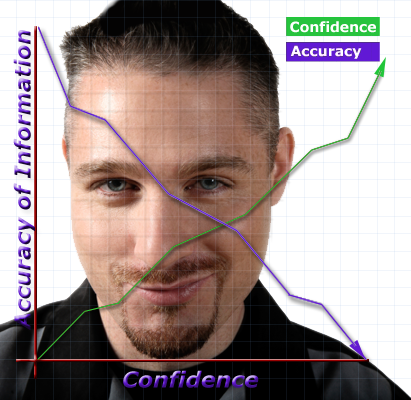
<style>
.page{position:relative;width:411px;height:400px;background:#ffffff}
.page>*{position:absolute;margin:0}
.t1{font:22px "Verdana-BoldItalic"}
.t2{font:14px "Verdana-Bold";color:#ffffff}
</style>
<div class="page">
<p class="t1" style="left:13px;top:30px;width:22px;height:301px;rotate:-90deg">Accuracy of Information</p>
<p class="t2" style="left:290px;top:21px;width:86px;height:12px">Confidence</p>
<p class="t1" style="left:123px;top:370px;width:136px;height:18px">Confidence</p>
</div>
